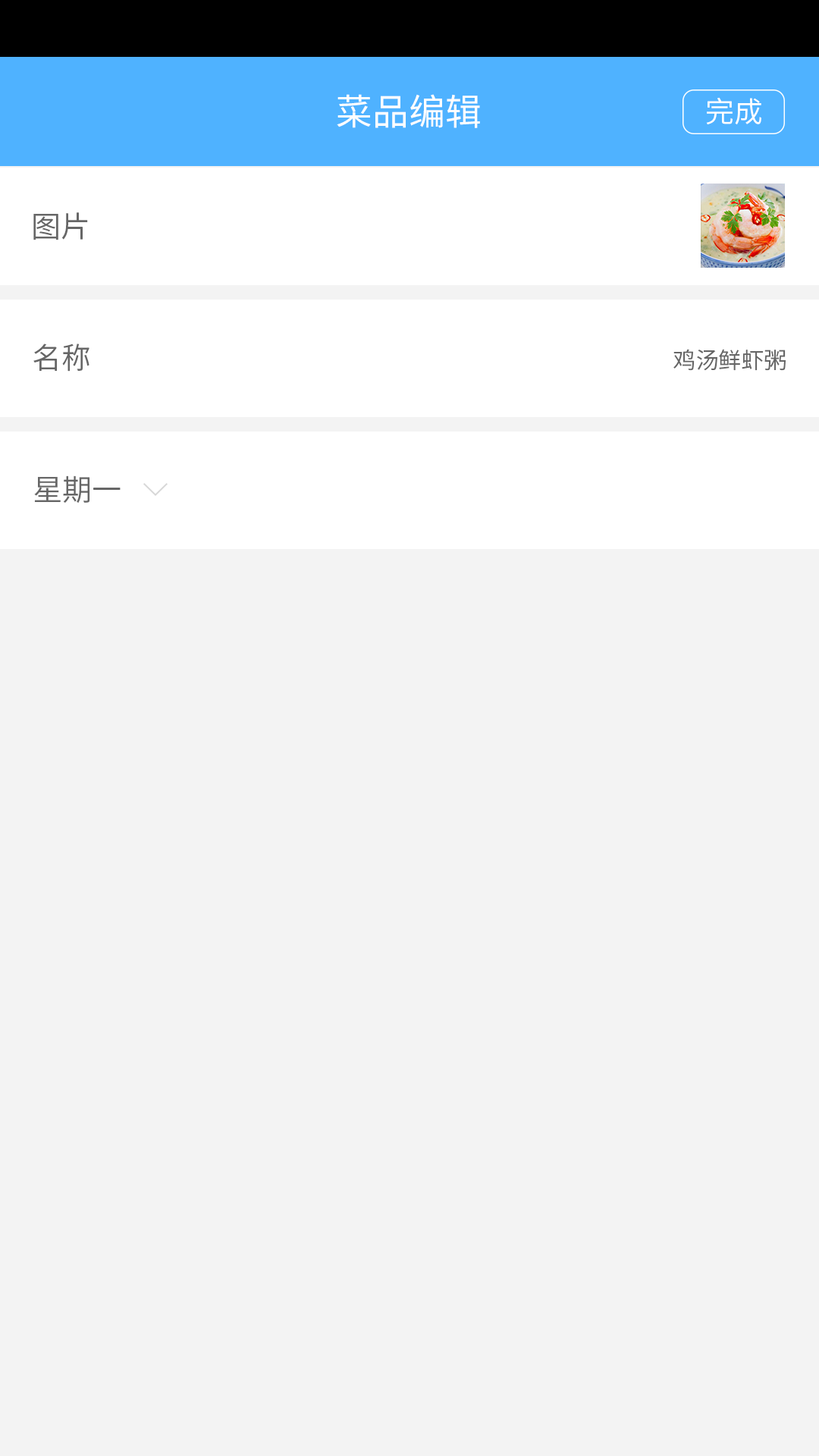
<style>
.page{position:relative;width:819px;height:1456px;background:#f3f3f3}
.page>*{position:absolute;margin:0}
.t1{font:36.4px "SourceHanSansCN-Regular";color:#fffefe}
.t2{font:28.8px "SourceHanSansCN-Normal";color:#ffffff}
.t3{font:29.6px "SourceHanSansCN-Normal";color:#666666}
.t4{font:22.7px "SourceHanSansCN-Normal";color:#666666}
</style>
<div class="page">
<p class="t1" style="left:337px;top:94px;width:143px;height:34px">菜品编辑</p>
<p class="t2" style="left:706px;top:97px;width:55px;height:27px">完成</p>
<p class="t3" style="left:33px;top:212px;width:55px;height:28px">图片</p>
<p class="t3" style="left:33px;top:344px;width:56px;height:28px">名称</p>
<p class="t4" style="left:673px;top:349px;width:113px;height:22px">鸡汤鲜虾粥</p>
<p class="t3" style="left:34px;top:475px;width:87px;height:28px">星期一</p>
</div>
